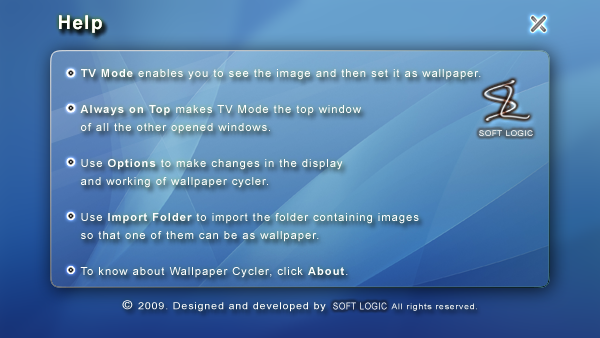
<style>
.page{position:relative;width:600px;height:338px}
.page>*{position:absolute;margin:0}
.t1{font:18.7px "Arial-BoldMT";letter-spacing:0.08em;color:#fefefe}
.t2{font:11.3px/18px "ArialMT";letter-spacing:0.08em;color:#fefefe}
.t3{font:11.3px/18px "Arial-BoldMT";letter-spacing:0.08em;color:#fefefe}
.t4{font:8px "ArialMT";letter-spacing:0.08em}
.t5{font:9.7px "ArialMT";letter-spacing:0.08em;color:#fefefe;scale:1.1 1}
.t6{font:12px "ArialMT";letter-spacing:0.08em;color:#fefefe;scale:1.1 1}
.t7{font:9.8px "ArialMT";letter-spacing:0.08em;scale:0.82 1}
.t8{font:8px "ArialMT";letter-spacing:0.08em;scale:1.1 1}
</style>
<div class="page">
<p class="t1" style="left:59px;top:15px;width:43px;height:18px">Help</p>
<p class="t1" style="left:59px;top:15px;width:43px;height:18px">Help</p>
<p class="t1" style="left:59px;top:15px;width:43px;height:18px">Help</p>
<p class="t2" style="left:80px;top:69px;width:401px;height:209px"><span class="t3">TV Mode</span> enables you to see the image and then set it as wallpaper.<br><br><span class="t3">Always on Top</span> makes TV Mode the top window<br>of all the other opened windows.<br><br>Use <span class="t3">Options</span> to make changes in the display<br>and working of wallpaper cycler.<br><br>Use <span class="t3">Import Folder</span> to import the folder containing images<br>so that one of them can be as wallpaper.<br><br>To know about Wallpaper Cycler, click <span class="t3">About</span>.</p>
<p class="t4" style="left:479px;top:130px;width:54px;height:6px">SOFT LOGIC</p>
<p class="t5" style="left:122px;top:300px;width:204px;height:12px"><span class="t6">© </span>2009. Designed and developed by</p>
<p class="t7" style="left:333px;top:302px;width:54px;height:8px">SOFT LOGIC</p>
<p class="t8" style="left:391px;top:303px;width:86px;height:8px">All rights reserved.</p>
</div>
